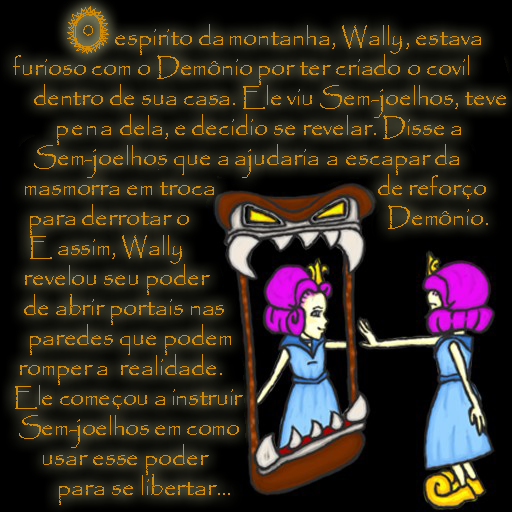
<style>
.page{position:relative;width:512px;height:512px}
.page>*{position:absolute;margin:0}
.t1{font:25px/30px "Papyrus-Regular";letter-spacing:-0.003em;color:#d18b07}
.t2{font:25px/30px "Papyrus-Regular";letter-spacing:0.037em;color:#d18b07}
.t3{font:25px/30px "Papyrus-Regular";letter-spacing:-0.043em;color:#d18b07}
.t4{font:25px/30px "Papyrus-Regular";letter-spacing:0.057em;color:#d18b07}
.t5{font:25px/30px "Papyrus-Regular";letter-spacing:-0.015em;color:#d18b07}
</style>
<div class="page">
<p class="t1" style="left:13px;top:24px;width:493px;height:481px">O espirito da montanha, Wall<span class="t2">y, </span>estava<br>furioso com o D<span class="t3">e</span>mônio por ter criado o covil <br>    dentro de sua casa<span class="t3">. </span>Ele viu Sem-joelhos, teve<br>      <span class="t4">  pena</span> dela, e decidio se revelar. Disse a<br>    Sem-joelhos que a ajudaria a escapar da<br>  masmorra em troca                                 de reforço<br>   para derrotar o                                        Demônio.<br>   E assim, Wally<br>  revelou seu poder<br>  de abrir portais nas <br>   paredes que podem<br> romper a  realidade.<br><span class="t5">Ele começou a instruir<br> Sem-joelhos em como<br>      </span>usar esse poder<br>         para se libertar...</p>
</div>
